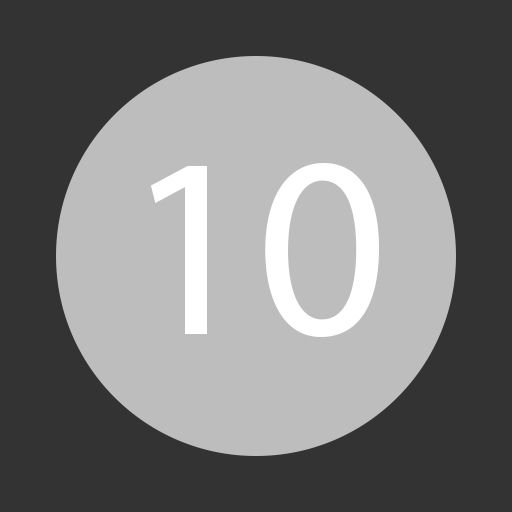
<style>
.page{position:relative;width:512px;height:512px;background:#333333}
.page>*{position:absolute;margin:0}
.t1{font:258px "MyriadPro-Regular";color:#ffffff}
</style>
<div class="page">
<p class="t1" style="left:150px;top:163px;width:229px;height:174px">10</p>
</div>
